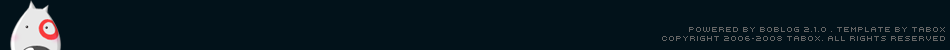
<style>
.page{position:relative;width:950px;height:50px;background:#02121a}
.page>*{position:absolute;margin:0}
.t1{font:8px "Kroeger0554";color:#666666}
</style>
<div class="page">
<p class="t1" style="left:662px;top:27px;width:283px;height:14px;text-align:right">POWERED BY BOBLOG 2.1.0 . TEMPLATE BY TABOX<br>COPYRIGHT 2006-2008 TABOX. ALL RIGHTS RESERVED</p>
</div>
